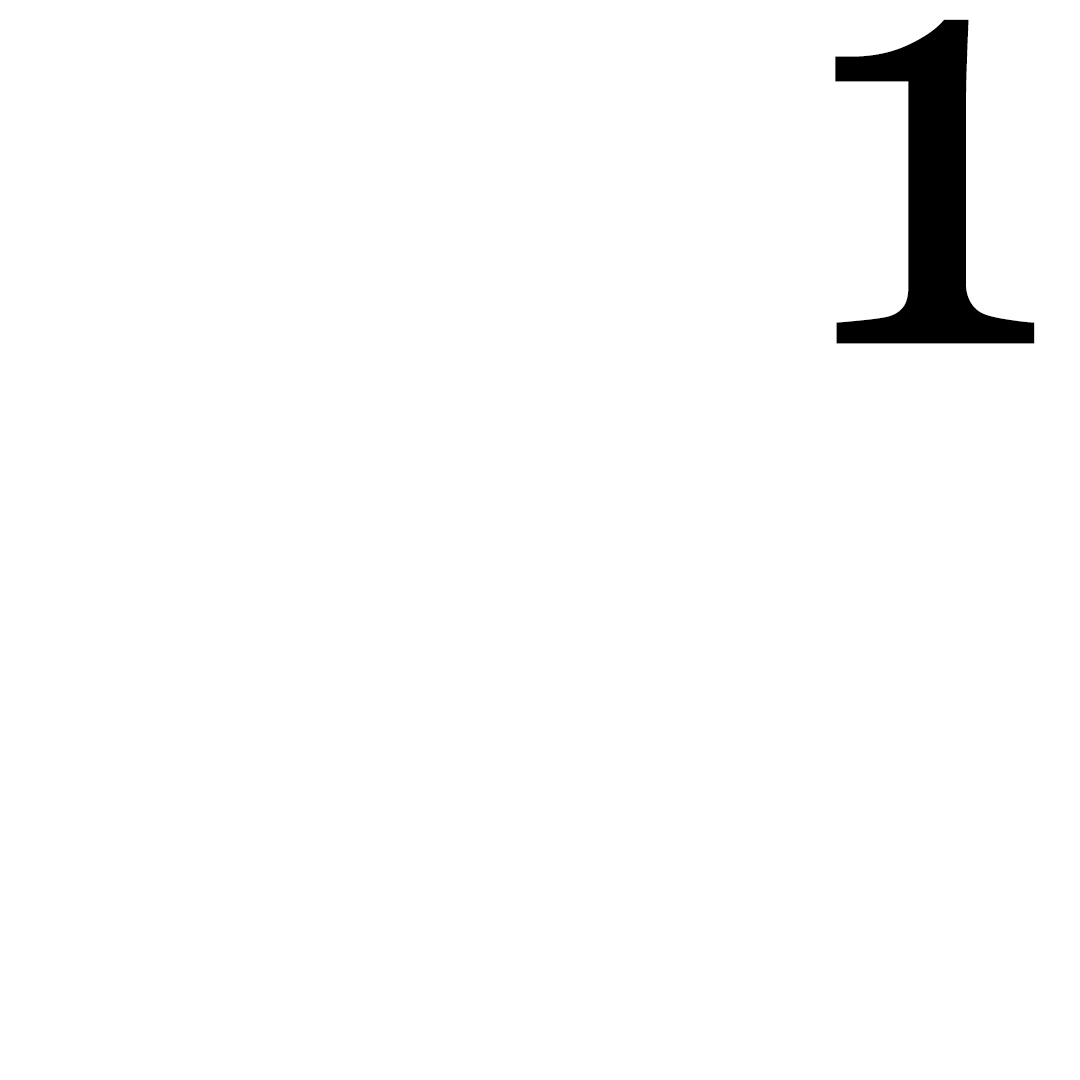
<style>
.page{position:relative;width:1080px;height:1080px;background:#ffffff}
.page>*{position:absolute;margin:0}
.t1{font:600px "Georgia";color:#000000}
</style>
<div class="page">
<p class="t1" style="left:835px;top:19px;width:200px;height:325px">1</p>
</div>
